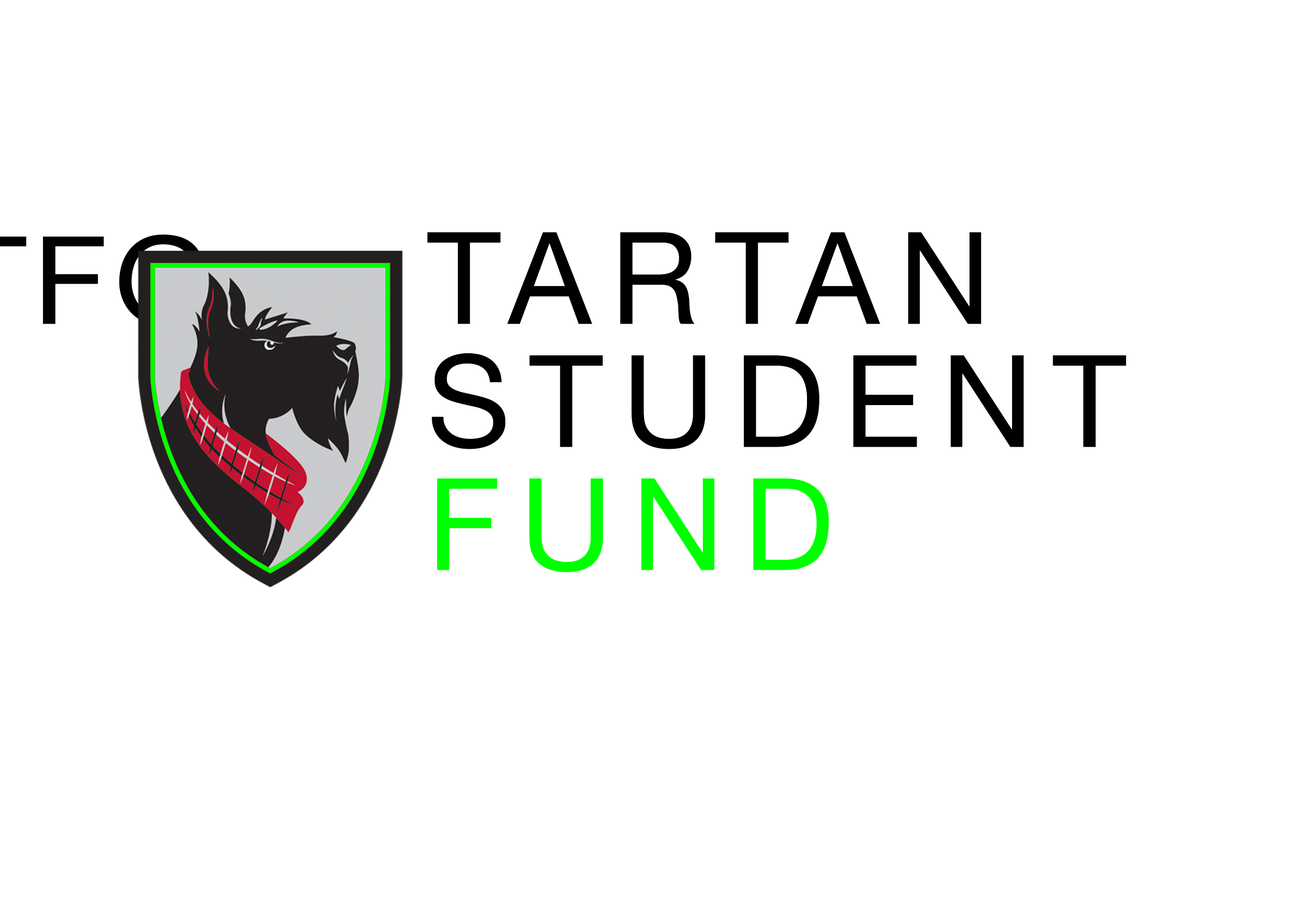
<style>
.page{position:relative;width:1292px;height:923px;background:#ffffff}
.page>*{position:absolute;margin:0}
.t1{font:128.2px/123.1px "HelveticaNeue";letter-spacing:0.15em;color:#000000}
.t2{font:128.2px/123.1px "HelveticaNeue";letter-spacing:0.15em;color:#00ff00}
</style>
<div class="page">
<p class="t1" style="left:427px;top:232px;width:699px;height:340px">TARTAN<br>STUDENT<br><span class="t2">FUND</span></p>
</div>
